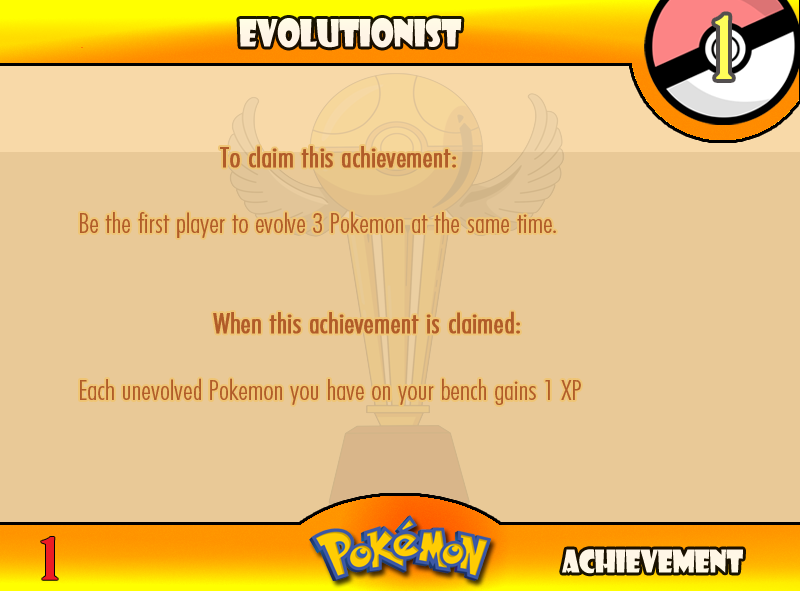
<style>
.page{position:relative;width:800px;height:591px;background:#e9c997}
.page>*{position:absolute;margin:0}
.t1{font:83.3px "BirchStd";letter-spacing:0.025em;color:#fffd59;font-weight:bold}
.t2{font:36.7px "ShowcardGothic-Reg";letter-spacing:-0.025em;color:#fff6e6;scale:0.91 1}
.t3{font:27.8px "FuturaCondensedBQ-Light";color:#b15c29;scale:1.08 1}
.t4{font:33.3px "FuturaCondensedBQ-Light";color:#b15c29;font-weight:bold;scale:1.08 1}
.t5{font:27.8px "FuturaCondensedBQ-Light";color:#b15c29;font-weight:bold;scale:1.08 1}
.t6{font:55.6px "BirchStd";color:#ed1c24;font-weight:bold;scale:1.5 1}
.t7{font:30.6px "ShowcardGothic-Reg";letter-spacing:-0.025em;color:#fff7e6;scale:0.91 1}
</style>
<div class="page">
<p class="t1" style="left:715px;top:15px;width:17px;height:64px">1</p>
<p class="t2" style="left:239px;top:18px;width:223px;height:30px">Evolutionist</p>
<p class="t3" style="left:80px;top:146px;width:501px;height:259px"><span class="t4">          <br>      </span><span class="t5">To claim this achievement:<br><br></span> Be the first player to evolve 3 Pokemon at the same time.<br><br><br>      <span class="t5">When this achievement is claimed:<br></span><br> Each unevolved Pokemon you have on your bench gains 1 XP</p>
<p class="t6" style="left:41px;top:537px;width:17px;height:43px">1</p>
<p class="t7" style="left:562px;top:549px;width:181px;height:25px">Achievement</p>
</div>
